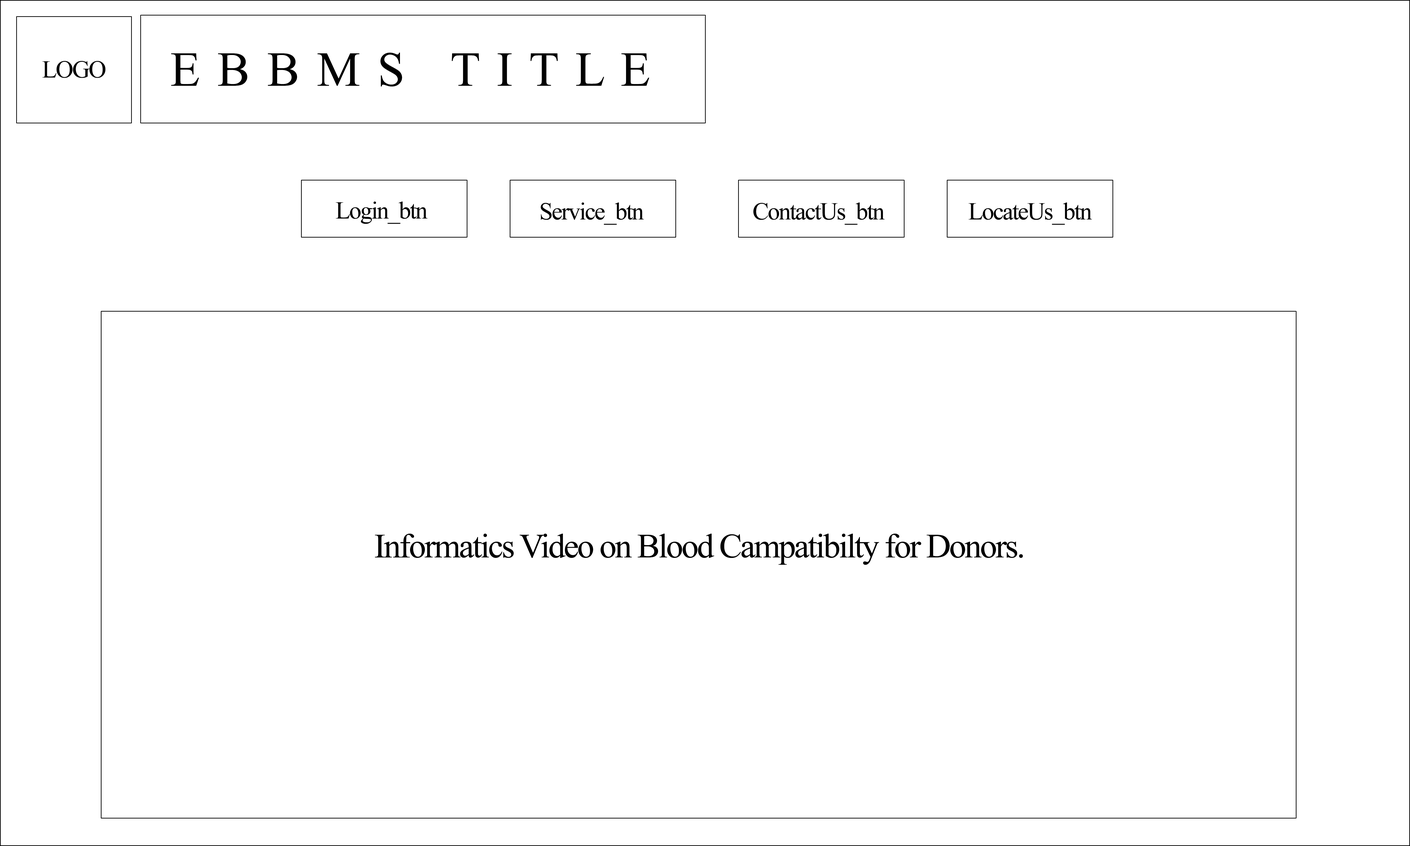
<style>
.page{position:relative;width:1410px;height:846px;background:#ffffff}
.page>*{position:absolute;margin:0}
.t1{font:48.9px "TimesNewRomanPSMT";letter-spacing:-0.05em;color:#000000}
.t2{font:24.5px "TimesNewRomanPSMT";letter-spacing:-0.05em;color:#000000}
.t3{font:34.3px "TimesNewRomanPSMT";letter-spacing:-0.05em;color:#000000}
</style>
<div class="page">
<p class="t1" style="left:171px;top:53px;width:478px;height:33px">E  B  B  M  S     T  I  T  L  E</p>
<p class="t2" style="left:42px;top:61px;width:63px;height:17px">LOGO</p>
<p class="t2" style="left:336px;top:201px;width:91px;height:23px">Login_btn</p>
<p class="t2" style="left:541px;top:202px;width:103px;height:23px">Service_btn</p>
<p class="t2" style="left:753px;top:202px;width:132px;height:23px">ContactUs_btn</p>
<p class="t2" style="left:968px;top:202px;width:124px;height:23px">LocateUs_btn</p>
<p class="t3" style="left:375px;top:533px;width:648px;height:32px">Informatics Video on Blood Campatibilty for Donors.</p>
</div>
